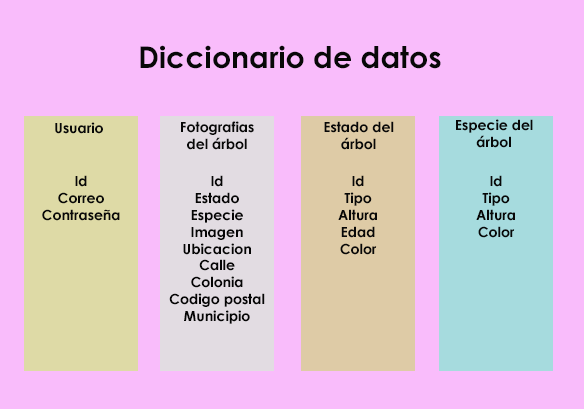
<style>
.page{position:relative;width:584px;height:409px;background:#f9bcfb}
.page>*{position:absolute;margin:0}
.t1{font:30px "CenturyGothic-Bold";color:#080808}
.t2{font:14px "CenturyGothic-Bold";color:#080808}
.t3{font:14px "CenturyGothic-Bold";color:#050505}
</style>
<div class="page">
<p class="t1" style="left:140px;top:45px;width:301px;height:24px">Diccionario de datos</p>
<p class="t2" style="left:55px;top:122px;width:48px;height:12px">Usuario</p>
<p class="t2" style="left:181px;top:121px;width:73px;height:29px;text-align:center">Fotografias del árbol</p>
<p class="t2" style="left:324px;top:121px;width:70px;height:29px;text-align:center">Estado del árbol</p>
<p class="t2" style="left:456px;top:119px;width:77px;height:29px;text-align:center">Especie del árbol</p>
<p class="t2" style="left:42px;top:175px;width:78px;height:46px;text-align:center">Id<br>Correo<br>Contraseña</p>
<p class="t3" style="left:169px;top:175px;width:96px;height:149px;text-align:center">Id<br>Estado<br>Especie<br>Imagen<br>Ubicacion<br>Calle<br>Colonia<br>Codigo postal<br>Municipio</p>
<p class="t2" style="left:338px;top:175px;width:39px;height:80px;text-align:center">Id<br>Tipo<br>Altura<br>Edad<br>Color</p>
<p class="t2" style="left:476px;top:175px;width:39px;height:63px;text-align:center">Id<br>Tipo<br>Altura<br>Color</p>
</div>
